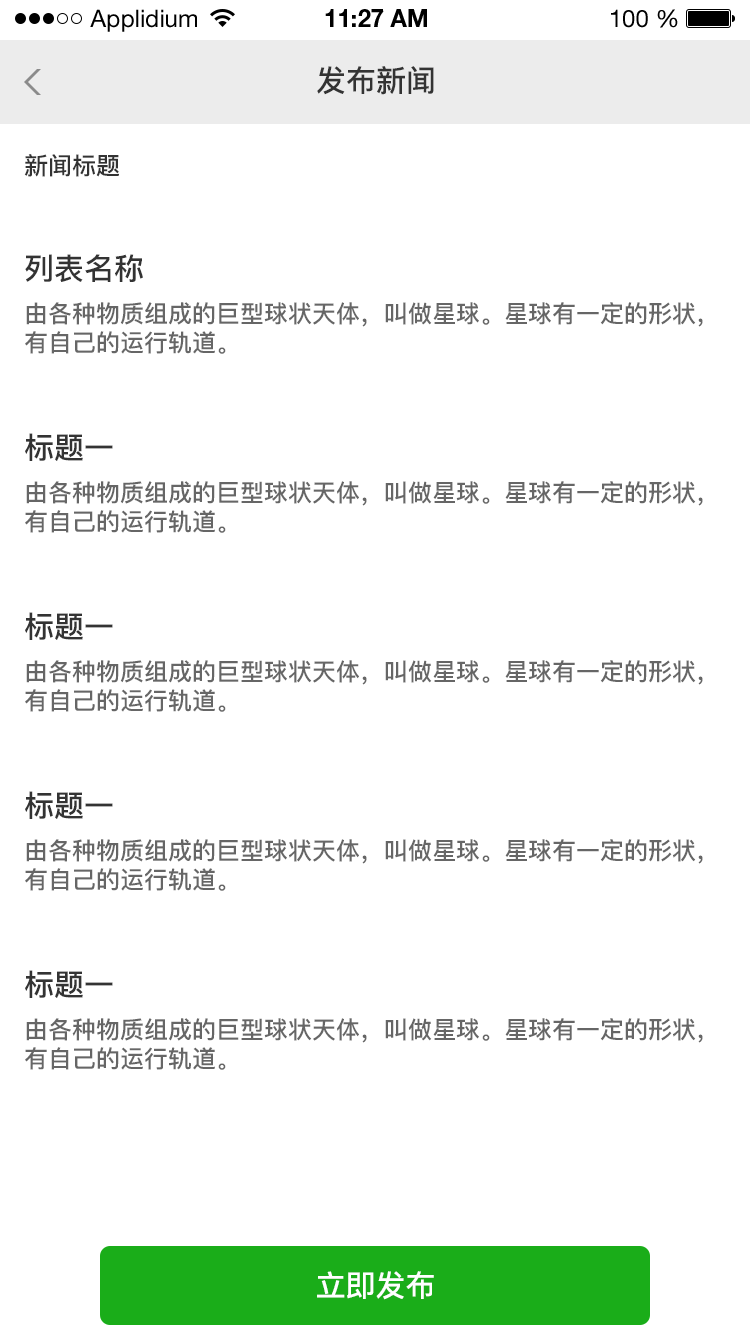
<style>
.page{position:relative;width:750px;height:1334px;background:#ffffff}
.page>*{position:absolute;margin:0}
.t1{font:24px "HelveticaNeueLTStd-Roman";color:#000000}
.t2{font:24px "HelveticaNeueLTStd-Bd";color:#000000}
.t3{font:30px "PingFang-SC-Bold";color:#333333}
.t4{font:24px "PingFang-SC-Bold";color:#333333}
.t5{font:24px "PingFang-SC-Bold";color:#666666}
.t6{font:30px "PingFang-SC-Bold";color:#ffffff}
</style>
<div class="page">
<p class="t1" style="left:90px;top:9px;width:107px;height:23px">Applidium</p>
<p class="t2" style="left:325px;top:9px;width:102px;height:18px">11:27 AM</p>
<p class="t1" style="left:611px;top:9px;width:67px;height:19px">100 %</p>
<p class="t3" style="left:317px;top:66px;width:117px;height:29px">发布新闻</p>
<p class="t4" style="left:24px;top:154px;width:95px;height:23px">新闻标题</p>
<p class="t3" style="left:25px;top:254px;width:118px;height:28px">列表名称</p>
<p class="t5" style="left:25px;top:302px;width:678px;height:52px">由各种物质组成的巨型球状天体，叫做星球。星球有一定的形状，<br>有自己的运行轨道。</p>
<p class="t3" style="left:25px;top:433px;width:88px;height:28px">标题一</p>
<p class="t5" style="left:25px;top:481px;width:678px;height:52px">由各种物质组成的巨型球状天体，叫做星球。星球有一定的形状，<br>有自己的运行轨道。</p>
<p class="t3" style="left:25px;top:612px;width:88px;height:28px">标题一</p>
<p class="t5" style="left:25px;top:660px;width:678px;height:52px">由各种物质组成的巨型球状天体，叫做星球。星球有一定的形状，<br>有自己的运行轨道。</p>
<p class="t3" style="left:25px;top:791px;width:88px;height:28px">标题一</p>
<p class="t5" style="left:25px;top:839px;width:678px;height:52px">由各种物质组成的巨型球状天体，叫做星球。星球有一定的形状，<br>有自己的运行轨道。</p>
<p class="t3" style="left:25px;top:970px;width:88px;height:28px">标题一</p>
<p class="t5" style="left:25px;top:1018px;width:678px;height:52px">由各种物质组成的巨型球状天体，叫做星球。星球有一定的形状，<br>有自己的运行轨道。</p>
<p class="t6" style="left:317px;top:1271px;width:117px;height:29px">立即发布</p>
</div>
